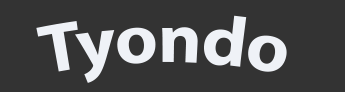
<style>
.page{position:relative;width:345px;height:92px;background:#333333}
.page>*{position:absolute;margin:0}
.t1{font:70px "MyriadPro-Bold";color:#eff2f7}
</style>
<div class="page">
<p class="t1" style="left:36px;top:15px;width:251px;height:68px">Tyondo</p>
</div>
